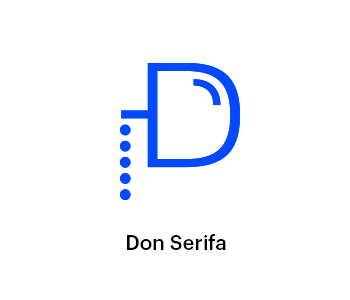
<style>
.page{position:relative;width:350px;height:300px;background:#ffffff}
.page>*{position:absolute;margin:0}
.t1{font:20.6px "Graphik-Medium";color:#000000}
</style>
<div class="page">
<p class="t1" style="left:127px;top:234px;width:99px;height:16px">Don Serifa</p>
</div>
